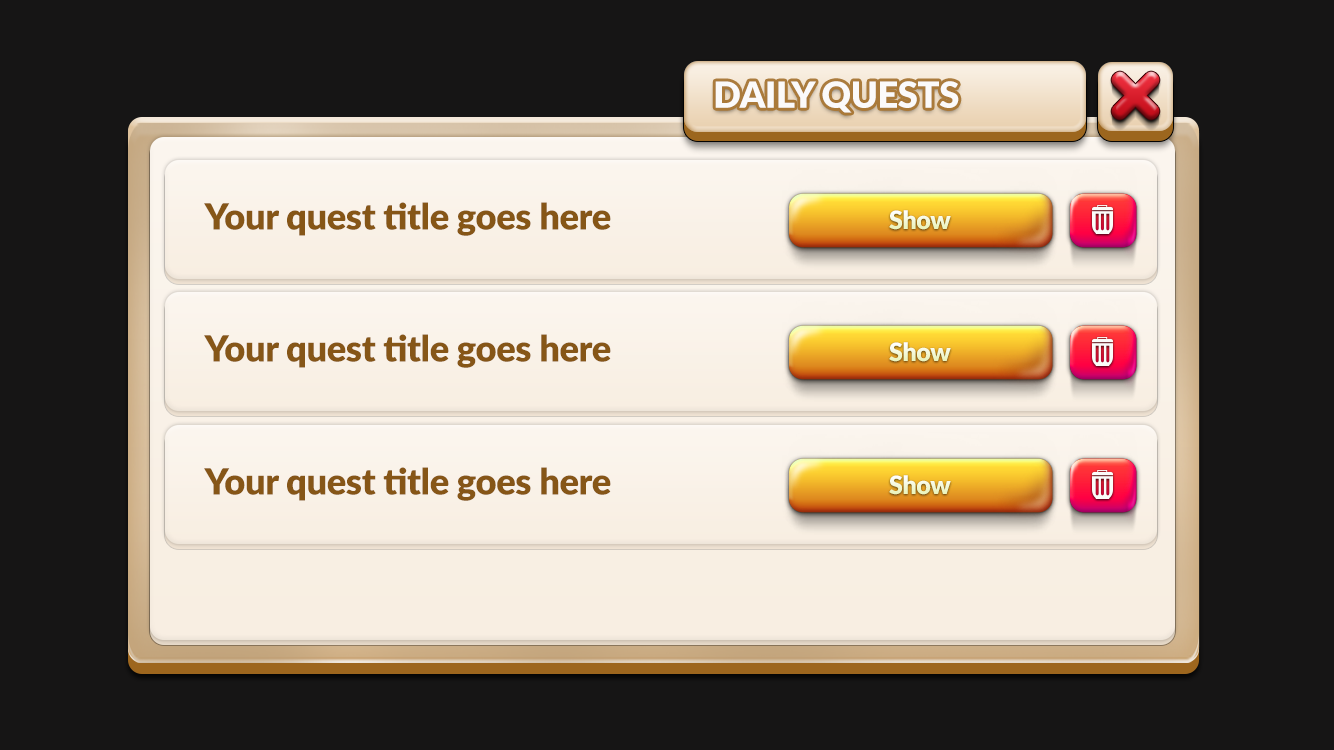
<style>
.page{position:relative;width:1334px;height:750px;background:#161515}
.page>*{position:absolute;margin:0}
.t1{font:36.2px "Lato-Black";letter-spacing:-0.01em;color:#fbfafa}
.t2{font:36.2px "Lato-Black";letter-spacing:-0.01em;color:#865617}
.t3{font:24.9px "Lato-Black";letter-spacing:-0.01em;color:#f3f8d6}
</style>
<div class="page">
<p class="t1" style="left:715px;top:81px;width:244px;height:32px">DAILY QUESTS</p>
<p class="t2" style="left:204px;top:202px;width:407px;height:34px">Your quest title goes here</p>
<p class="t3" style="left:889px;top:210px;width:62px;height:20px">Show</p>
</div>
